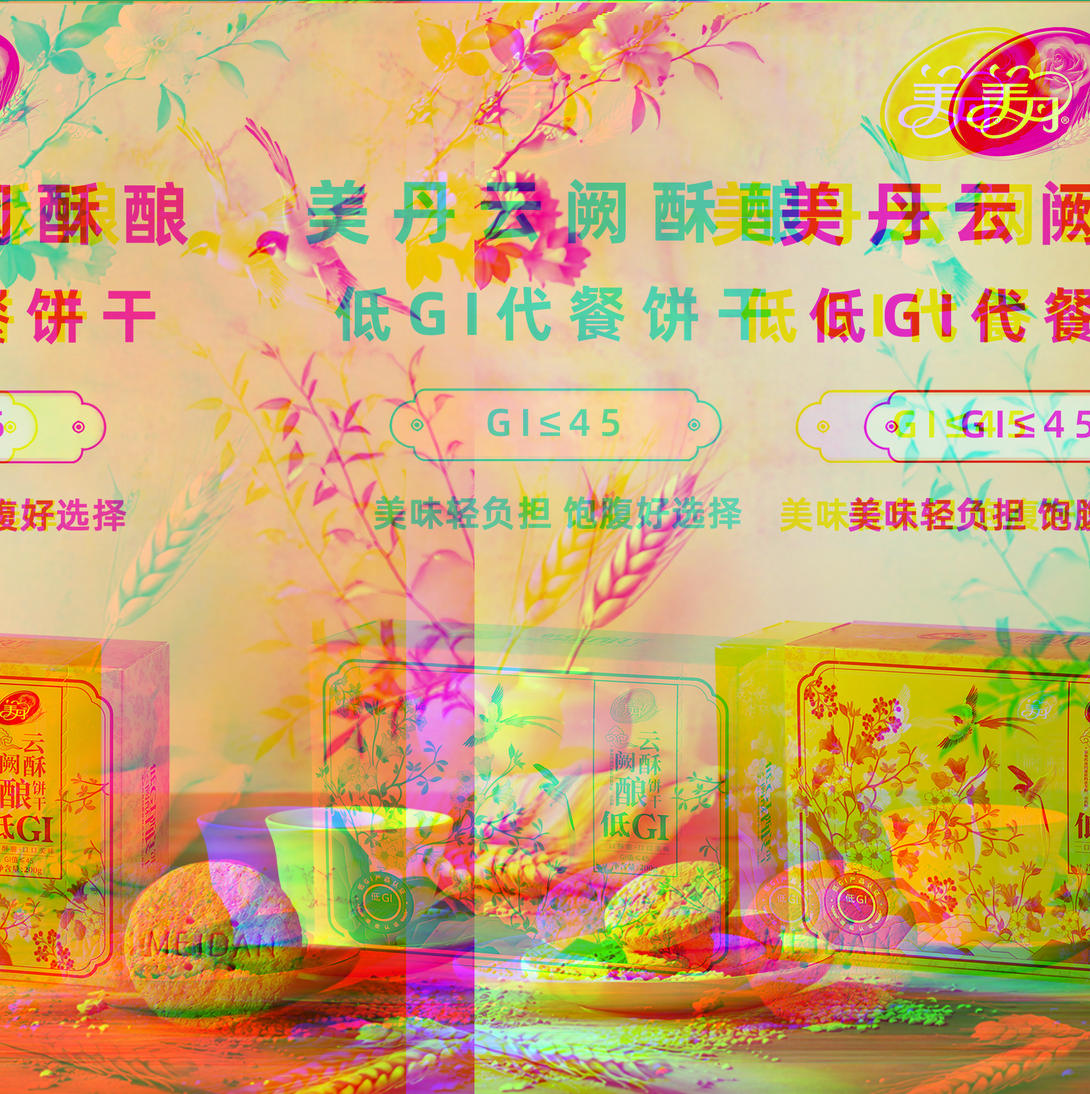
<style>
.page{position:relative;width:1090px;height:1094px}
.page>*{position:absolute;margin:0}
.t1{font:70.8px "AlibabaPuHuiTi-Bold";letter-spacing:0.24em}
.t2{font:61px "AlibabaPuHuiTi-Bold";letter-spacing:0.22em;color:#50cda4}
.t3{font:38.7px "AlibabaPuHuiTi-Medium";letter-spacing:0.2em}
.t4{font:35.6px "AlibabaPuHuiTi-Medium";font-weight:bold}
</style>
<div class="page">
<p class="t1" style="left:305px;top:177px;width:499px;height:67px">美丹云阙酥酿</p>
<p class="t2" style="left:334px;top:284px;width:437px;height:58px">低GI代餐饼干</p>
<p class="t3" style="left:487px;top:408px;width:132px;height:27px">GI≤45</p>
<p class="t4" style="left:374px;top:494px;width:368px;height:35px">美味轻负担 饱腹好选择</p>
</div>
